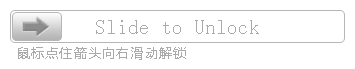
<style>
.page{position:relative;width:355px;height:69px;background:#ffffff}
.page>*{position:absolute;margin:0}
.t1{font:20.8px "NSimSun";color:#aaaaaa}
.t2{font:12.5px "MicrosoftYaHei";letter-spacing:0.1em;color:#aaaaaa}
</style>
<div class="page">
<p class="t1" style="left:96px;top:20px;width:163px;height:14px">Slide to Unlock</p>
<p class="t2" style="left:18px;top:47px;width:168px;height:13px">鼠标点住箭头向右滑动解锁</p>
</div>
